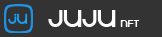
<style>
.page{position:relative;width:162px;height:37px;background:#333333}
.page>*{position:absolute;margin:0}
.t1{font:27.7px "KravitzExtraThermal";color:#ffffff}
.t2{font:12px "KravitzExtraThermal";color:#ffffff}
</style>
<div class="page">
<p class="t1" style="left:48px;top:10px;width:68px;height:17px">JUJU</p>
<p class="t2" style="left:120px;top:20px;width:20px;height:7px">NFT</p>
</div>
